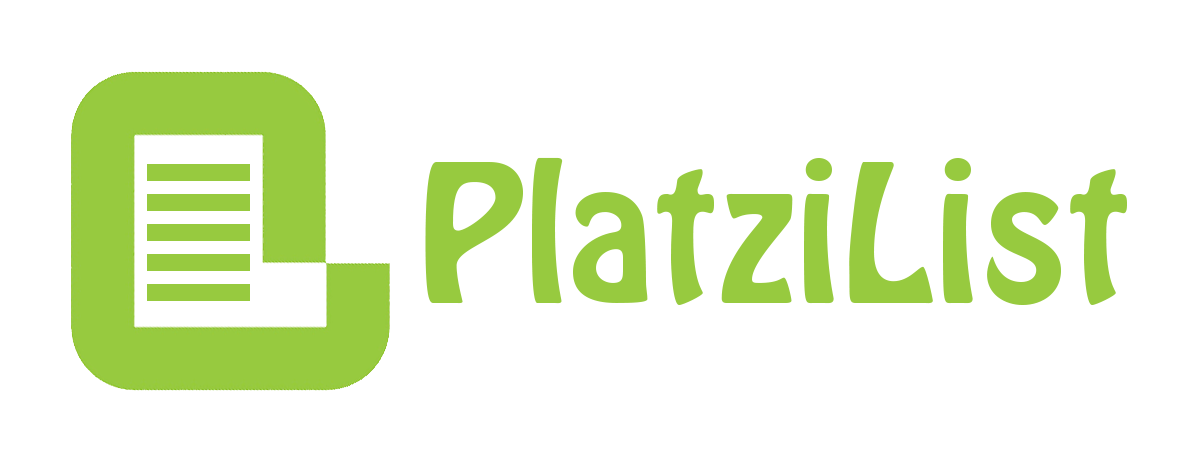
<style>
.page{position:relative;width:1184px;height:462px;background:#ffffff}
.page>*{position:absolute;margin:0}
.t1{font:170px "HoboStd";color:#97ca3f}
</style>
<div class="page">
<p class="t1" style="left:425px;top:157px;width:702px;height:148px">PlatziList</p>
</div>
